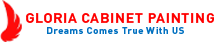
<style>
.page{position:relative;width:214px;height:43px;background:#ffffff}
.page>*{position:absolute;margin:0}
.t1{font:14px "DIN-Bold";letter-spacing:0.05em;color:#ff0000;text-transform:uppercase}
.t2{font:9.7px "DIN-Bold";letter-spacing:0.05em;color:#0070c0}
</style>
<div class="page">
<p class="t1" style="left:26px;top:13px;width:189px;height:10px">GLORIA CABINET PAINTING</p>
<p class="t2" style="left:47px;top:27px;width:137px;height:7px">Dreams Comes True With US</p>
</div>
